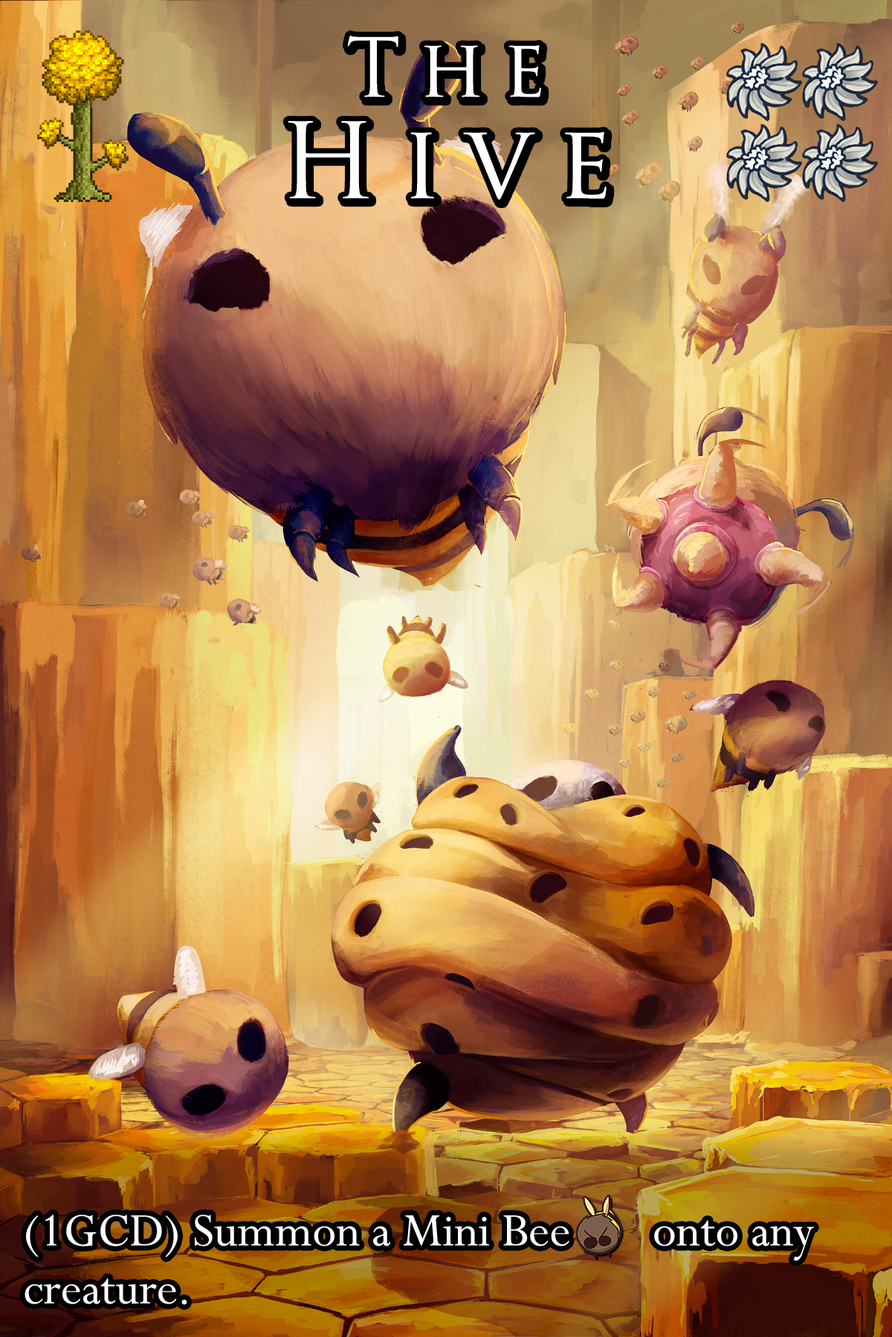
<style>
.page{position:relative;width:892px;height:1337px}
.page>*{position:absolute;margin:0}
.t1{font:175.1px/88.4px "TrajanPro-Regular";letter-spacing:0.24em;color:#ffffff}
.t2{font:135.9px/88.4px "TrajanPro-Regular";letter-spacing:0.24em;color:#ffffff}
.t3{font:89.2px "Perpetua";color:#ffffff}
</style>
<div class="page">
<p class="t1" style="left:288px;top:36px;width:318px;height:164px;text-align:center"><span class="t2">The<br></span>Hive</p>
<p class="t3" style="left:25px;top:1215px;width:789px;height:90px">(1GCD) Summon a Mini Bee       onto any creature.</p>
</div>
